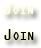
<style>
.page{position:relative;width:41px;height:48px;background:#ffffff}
.page>*{position:absolute;margin:0}
.t1{font:17px "OCRAExtended";color:#ffffff;font-variant:small-caps}
.t2{font:17px "OCRAExtended";color:#000000;font-variant:small-caps}
</style>
<div class="page">
<p class="t1" style="left:4px;top:3px;width:29px;height:11px">Join</p>
<p class="t2" style="left:4px;top:29px;width:30px;height:11px">Join</p>
</div>
